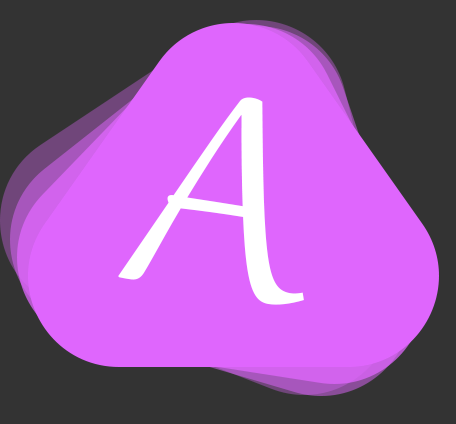
<style>
.page{position:relative;width:456px;height:424px;background:#df66fd}
.page>*{position:absolute;margin:0}
.t1{font:348.8px "Gabriola";color:#ffffff}
</style>
<div class="page">
<p class="t1" style="left:118px;top:97px;width:186px;height:208px;rotate:10deg">A</p>
</div>
